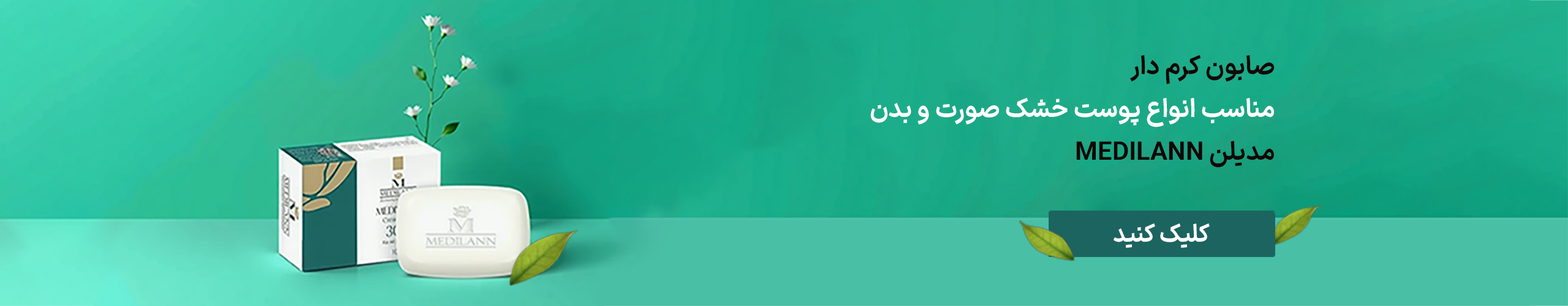
<style>
.page{position:relative;width:1568px;height:306px}
.page>*{position:absolute;margin:0}
.t1{font:25.7px/42.8px "IRANSansXFaNum-BoldD4";color:#ffffff}
.t2{font:25.7px/42.8px "IRANSansXFaNum-BoldD4";color:#120606}
.t3{font:24.6px "IRANSansXFaNum-BoldD4";color:#ffffff;scale:0.96 1}
</style>
<div class="page">
<p class="t1" style="left:870px;top:55px;width:404px;height:113px;text-align:right"><span class="t2">صابون کرم دار <br></span>مناسب انواع پوست خشک صورت و بدن<br><span class="t2">مدیلن MEDILANN</span></p>
<p class="t3" style="left:1114px;top:224px;width:96px;height:24px">کلیک کنید</p>
</div>
